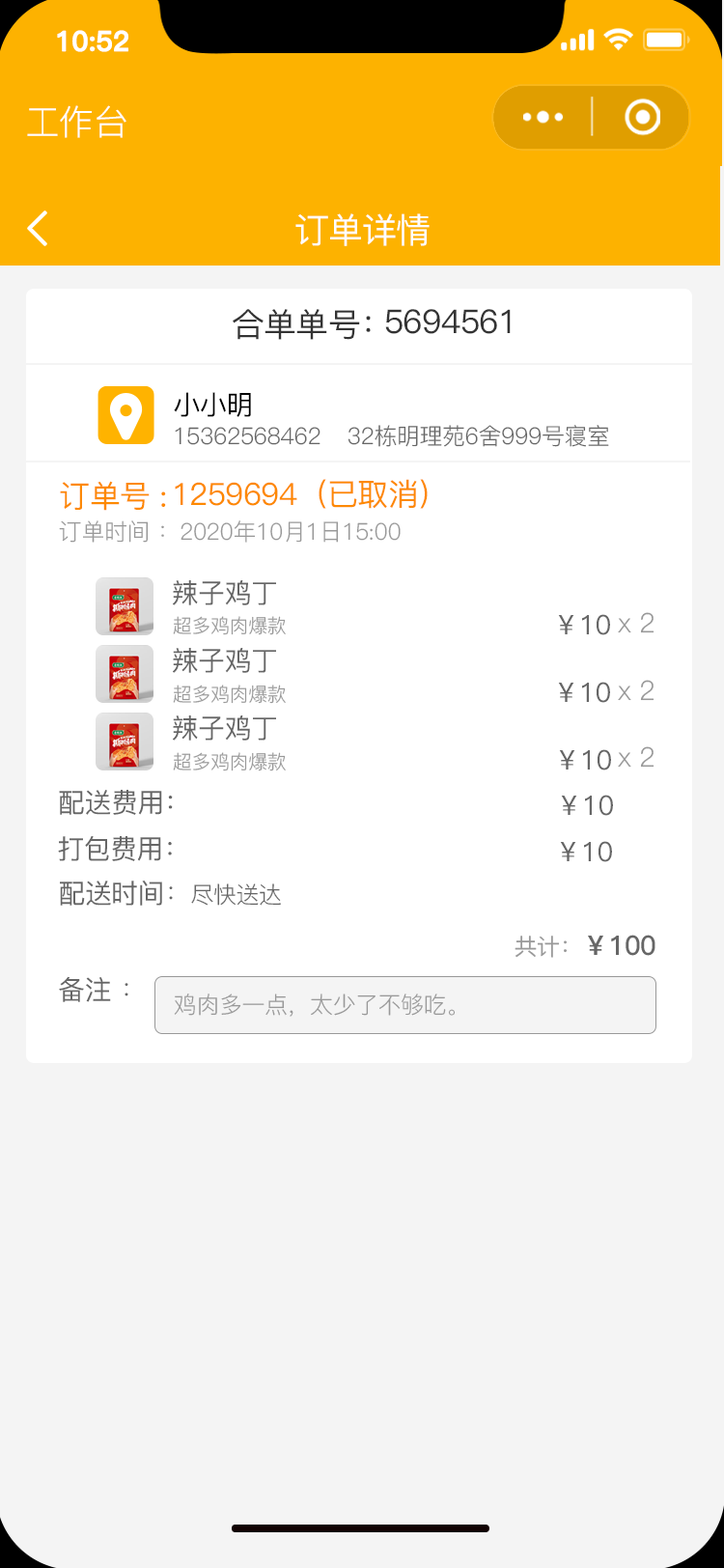
<style>
.page{position:relative;width:724px;height:1568px;background:#f4f4f4}
.page>*{position:absolute;margin:0}
.t1{font:27.5px "PingFang-SC-Bold";letter-spacing:-0.02em;color:#ffffff;font-weight:bold}
.t2{font:34.8px "PingFang-SC-Regular";letter-spacing:-0.02em;color:#ffffff}
.t3{font:34.8px "PingFang-SC-Medium";letter-spacing:-0.02em;color:#fefefe}
.t4{font:32.8px "PingFang-SC-Medium";letter-spacing:-0.02em;color:#333333}
.t5{font:27px "PingFang-SC-Medium";letter-spacing:-0.02em;color:#000000}
.t6{font:23.2px "PingFang-SC-Regular";letter-spacing:-0.02em;color:#666666}
.t7{font:30.9px "PingFang-SC-Medium";letter-spacing:-0.02em;color:#fd8900}
.t8{font:23.2px "PingFang-SC-Regular";letter-spacing:-0.02em;color:#999999}
.t9{font:27px "PingFang-SC-Medium";letter-spacing:-0.02em;color:#666666}
.t10{font:19.3px "PingFang-SC-Regular";letter-spacing:-0.02em;color:#999999}
.t11{font:27px "PingFang-SC-Regular";letter-spacing:-0.02em;color:#999999}
.t12{font:27px "PingFang-SC-Regular";letter-spacing:-0.02em;color:#666666}
.t13{font:27px "PingFang-SC-Bold";letter-spacing:-0.02em;color:#666666}
.t14{font:23.2px "PingFang-SC-Medium";letter-spacing:-0.02em;color:#999999}
</style>
<div class="page">
<p class="t1" style="left:57px;top:30px;width:71px;height:22px">10:52</p>
<p class="t2" style="left:27px;top:105px;width:99px;height:33px">工作台</p>
<p class="t3" style="left:295px;top:213px;width:135px;height:33px">订单详情</p>
<p class="t4" style="left:233px;top:309px;width:138px;height:31px">合单单号：</p>
<p class="t4" style="left:385px;top:309px;width:126px;height:25px">5694561</p>
<p class="t5" style="left:174px;top:392px;width:77px;height:25px">小小明</p>
<p class="t6" style="left:348px;top:425px;width:261px;height:22px">32栋明理苑6舍999号寝室</p>
<p class="t6" style="left:175px;top:427px;width:146px;height:18px">15362568462</p>
<p class="t7" style="left:60px;top:481px;width:106px;height:30px">订单号 :</p>
<p class="t7" style="left:175px;top:479px;width:253px;height:30px">1259694（已取消）</p>
<p class="t8" style="left:59px;top:520px;width:342px;height:23px">订单时间 ：2020年10月1日15:00</p>
<p class="t9" style="left:173px;top:580px;width:103px;height:25px">辣子鸡丁</p>
<p class="t10" style="left:173px;top:616px;width:113px;height:19px">超多鸡肉爆款</p>
<p class="t9" style="left:558px;top:614px;width:52px;height:21px">￥10</p>
<p class="t11" style="left:618px;top:612px;width:37px;height:21px">x 2</p>
<p class="t9" style="left:173px;top:648px;width:103px;height:25px">辣子鸡丁</p>
<p class="t10" style="left:173px;top:685px;width:113px;height:19px">超多鸡肉爆款</p>
<p class="t9" style="left:558px;top:682px;width:52px;height:21px">￥10</p>
<p class="t11" style="left:618px;top:680px;width:37px;height:21px">x 2</p>
<p class="t9" style="left:173px;top:715px;width:103px;height:26px">辣子鸡丁</p>
<p class="t9" style="left:559px;top:749px;width:52px;height:21px">￥10</p>
<p class="t11" style="left:618px;top:746px;width:37px;height:22px">x 2</p>
<p class="t10" style="left:173px;top:752px;width:113px;height:19px">超多鸡肉爆款</p>
<p class="t9" style="left:59px;top:790px;width:114px;height:25px">配送费用：</p>
<p class="t9" style="left:561px;top:795px;width:52px;height:21px">￥10</p>
<p class="t9" style="left:58px;top:836px;width:114px;height:25px">打包费用：</p>
<p class="t9" style="left:560px;top:841px;width:52px;height:21px">￥10</p>
<p class="t9" style="left:60px;top:881px;width:221px;height:25px">配送时间<span class="t12">：</span><span class="t6">尽快送达</span></p>
<p class="t13" style="left:515px;top:935px;width:141px;height:23px"><span class="t14">共计：</span>￥100</p>
<p class="t9" style="left:59px;top:976px;width:69px;height:26px">备注 <span class="t12">：</span></p>
<p class="t8" style="left:174px;top:994px;width:282px;height:23px">鸡肉多一点，太少了不够吃。</p>
</div>
